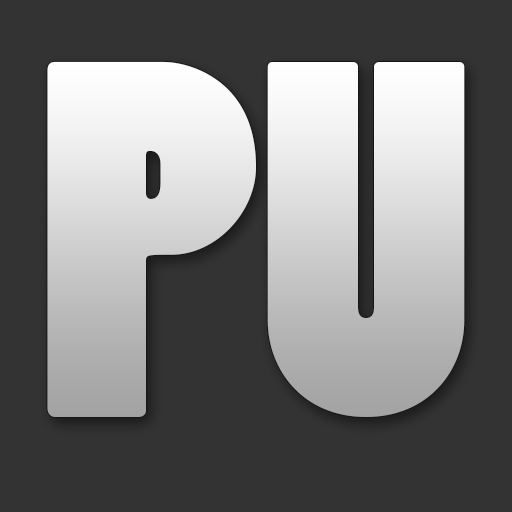
<style>
.page{position:relative;width:512px;height:512px;background:#333333}
.page>*{position:absolute;margin:0}
.t1{font:473px "PoplarStd"}
</style>
<div class="page">
<p class="t1" style="left:47px;top:61px;width:418px;height:356px">PU</p>
</div>
